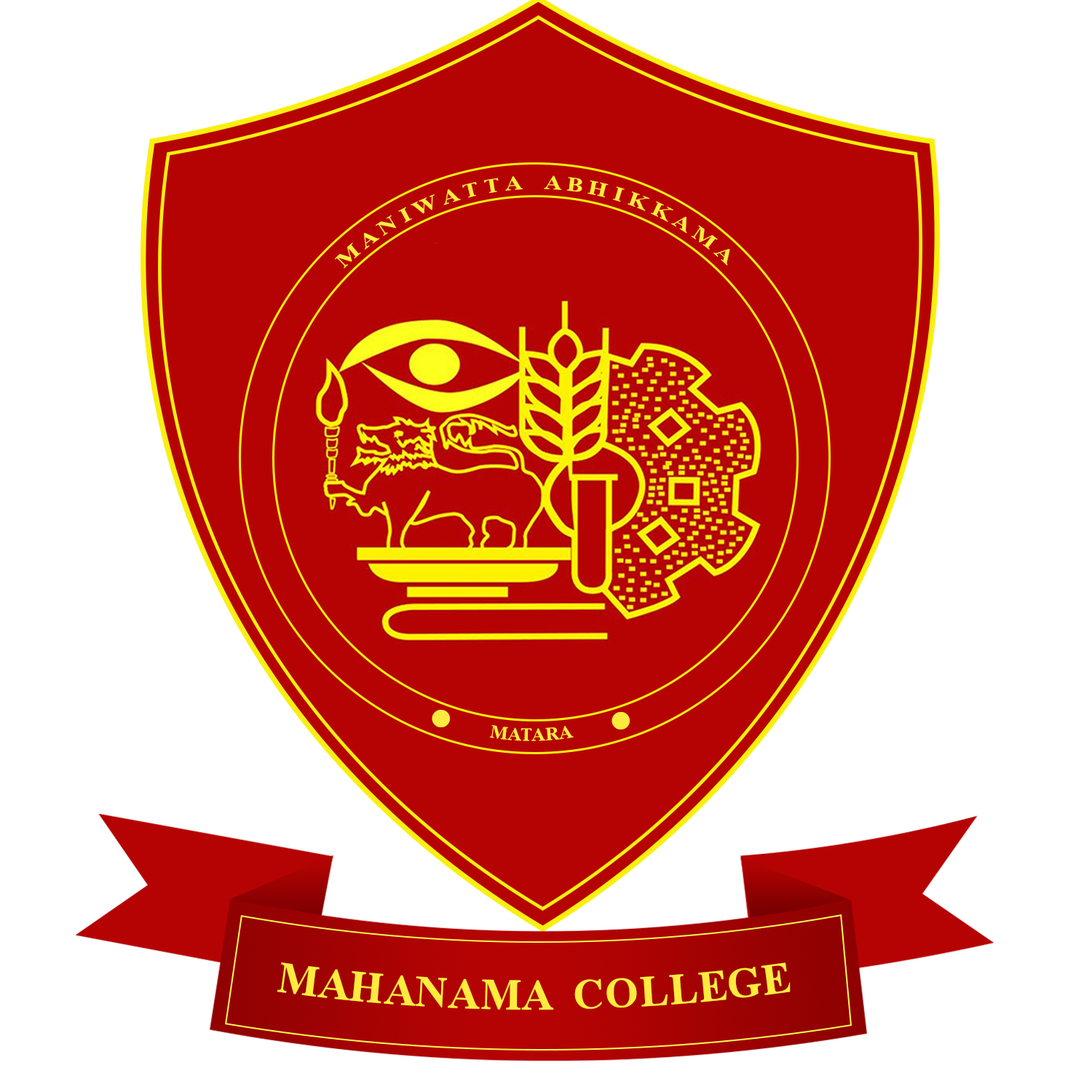
<style>
.page{position:relative;width:1092px;height:1092px;background:#ffffff}
.page>*{position:absolute;margin:0}
.t1{font:19.7px "TimesNewRomanPS-BoldMT";color:#ffeb40}
.t2{font:109.2px "TimesNewRomanPS-BoldMT";color:#ffeb40}
.t3{font:18.2px "TimesNewRomanPS-BoldMT";color:#ffeb40}
.t4{font:43.4px "TimesNewRomanPS-BoldMT";color:#ffeb40}
</style>
<div class="page">
<p class="t1" style="left:334px;top:175px;width:396px;height:94px">M A N I W A T T A    A B H I K K A M A</p>
<p class="t2" style="left:432px;top:710px;width:18px;height:17px">.</p>
<p class="t2" style="left:612px;top:712px;width:18px;height:17px">.</p>
<p class="t3" style="left:489px;top:725px;width:85px;height:16px">MATARA</p>
<p class="t4" style="left:277px;top:962px;width:514px;height:48px">MAHANAMA  COLLEGE</p>
</div>
